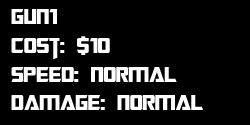
<style>
.page{position:relative;width:250px;height:125px;background:#000000}
.page>*{position:absolute;margin:0}
.t1{font:24px "TransformersMovie";color:#ffffff}
</style>
<div class="page">
<p class="t1" style="left:11px;top:9px;width:192px;height:101px">Gun1<br>Cost: $10<br>Speed: Normal<br>Damage: Normal</p>
</div>
